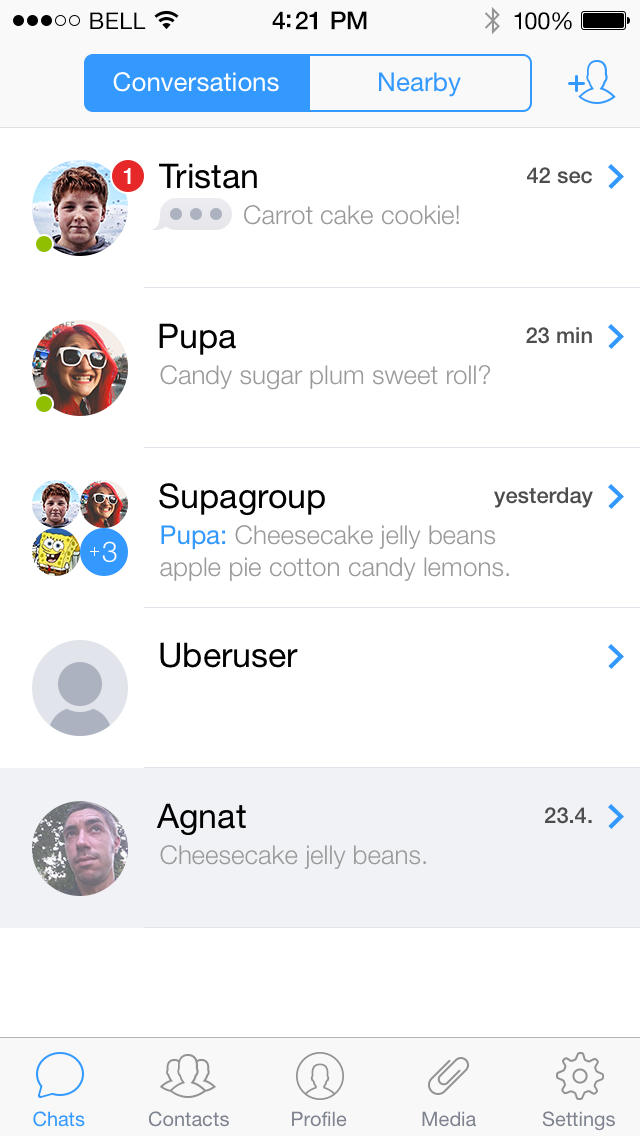
<style>
.page{position:relative;width:640px;height:1136px;background:#ffffff}
.page>*{position:absolute;margin:0}
.t1{font:23px "HelveticaNeue";letter-spacing:0.02em;color:#000000}
.t2{font:25px "HelveticaNeue-Medium";letter-spacing:-0.02em;color:#000000}
.t3{font:24px "HelveticaNeue";letter-spacing:-0.02em;color:#000000}
.t4{font:26px "HelveticaNeue";color:#ffffff}
.t5{font:26px "HelveticaNeue";color:#3399ff}
.t6{font:22px "HelveticaNeue-Medium";letter-spacing:-0.02em;color:#ffffff}
.t7{font:34px "HelveticaNeue";color:#000000}
.t8{font:22px "HelveticaNeue-Medium";color:#4d4d4d}
.t9{font:26px "HelveticaNeue-Light";color:#999999}
.t10{font:26px/32px "HelveticaNeue-Light";color:#999999}
.t11{font:26px/32px "HelveticaNeue";color:#3399ff}
.t12{font:20px "HelveticaNeue";color:#3399ff}
.t13{font:20px "HelveticaNeue";color:#7e838f}
</style>
<div class="page">
<p class="t1" style="left:90px;top:12px;width:56px;height:17px">BELL</p>
<p class="t2" style="left:272px;top:11px;width:95px;height:19px">4:21 PM</p>
<p class="t3" style="left:514px;top:12px;width:58px;height:18px">100%</p>
<p class="t4" style="left:113px;top:72px;width:166px;height:20px">Conversations</p>
<p class="t5" style="left:379px;top:72px;width:82px;height:25px">Nearby</p>
<p class="t6" style="left:123px;top:168px;width:8px;height:16px">1</p>
<p class="t7" style="left:159px;top:163px;width:98px;height:26px">Tristan</p>
<p class="t8" style="left:527px;top:167px;width:65px;height:17px">42 sec</p>
<p class="t9" style="left:244px;top:205px;width:215px;height:20px">Carrot cake cookie!</p>
<p class="t7" style="left:159px;top:323px;width:77px;height:32px">Pupa</p>
<p class="t8" style="left:526px;top:327px;width:66px;height:17px">23 min</p>
<p class="t9" style="left:160px;top:365px;width:330px;height:25px">Candy sugar plum sweet roll?</p>
<p class="t7" style="left:159px;top:483px;width:166px;height:33px">Supagroup</p>
<p class="t8" style="left:494px;top:487px;width:99px;height:21px">yesterday</p>
<p class="t10" style="left:160px;top:525px;width:349px;height:56px"><span class="t11">Pupa:</span> Cheesecake jelly beans apple pie cotton candy lemons.</p>
<p class="t7" style="left:160px;top:642px;width:138px;height:26px">Uberuser</p>
<p class="t7" style="left:156px;top:803px;width:90px;height:33px">Agnat</p>
<p class="t8" style="left:544px;top:807px;width:48px;height:17px">23.4.</p>
<p class="t9" style="left:160px;top:845px;width:266px;height:24px">Cheesecake jelly beans.</p>
<p class="t12" style="left:33px;top:1111px;width:52px;height:16px">Chats</p>
<p class="t13" style="left:148px;top:1111px;width:81px;height:16px">Contacts</p>
<p class="t13" style="left:292px;top:1111px;width:55px;height:16px">Profile</p>
<p class="t13" style="left:422px;top:1111px;width:54px;height:16px">Media</p>
<p class="t13" style="left:542px;top:1111px;width:73px;height:20px">Settings</p>
</div>
